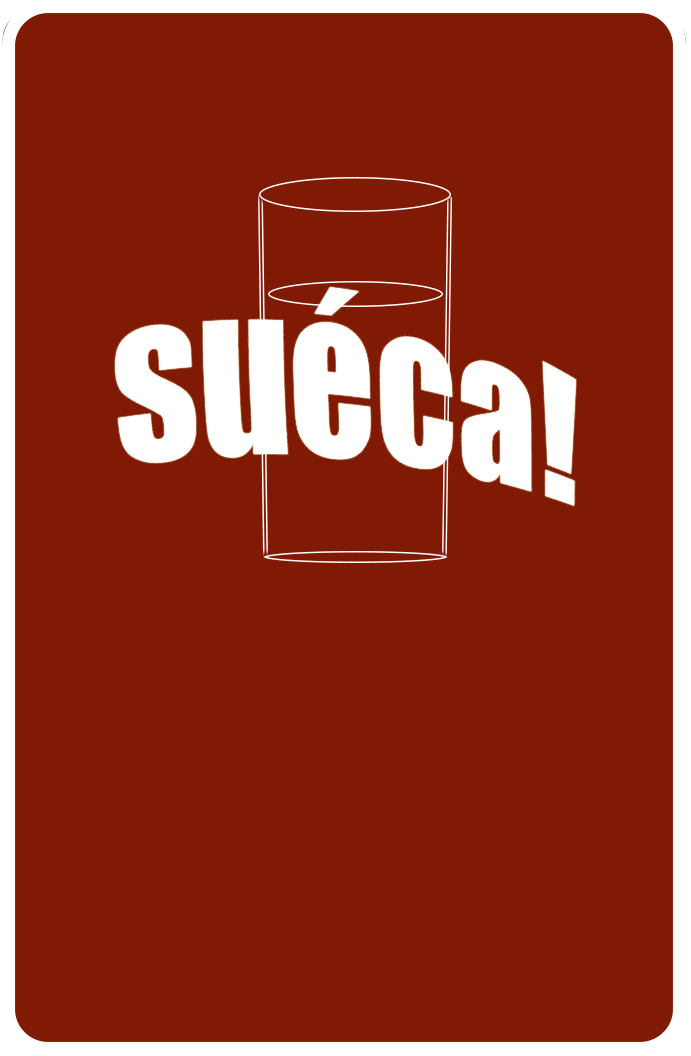
<style>
.page{position:relative;width:691px;height:1056px;background:#811a05}
.page>*{position:absolute;margin:0}
.t1{font:140px "Impact";color:#ffffff;scale:0.8 1}
</style>
<div class="page">
<p class="t1" style="left:115px;top:287px;width:462px;height:219px">suéca!</p>
</div>
